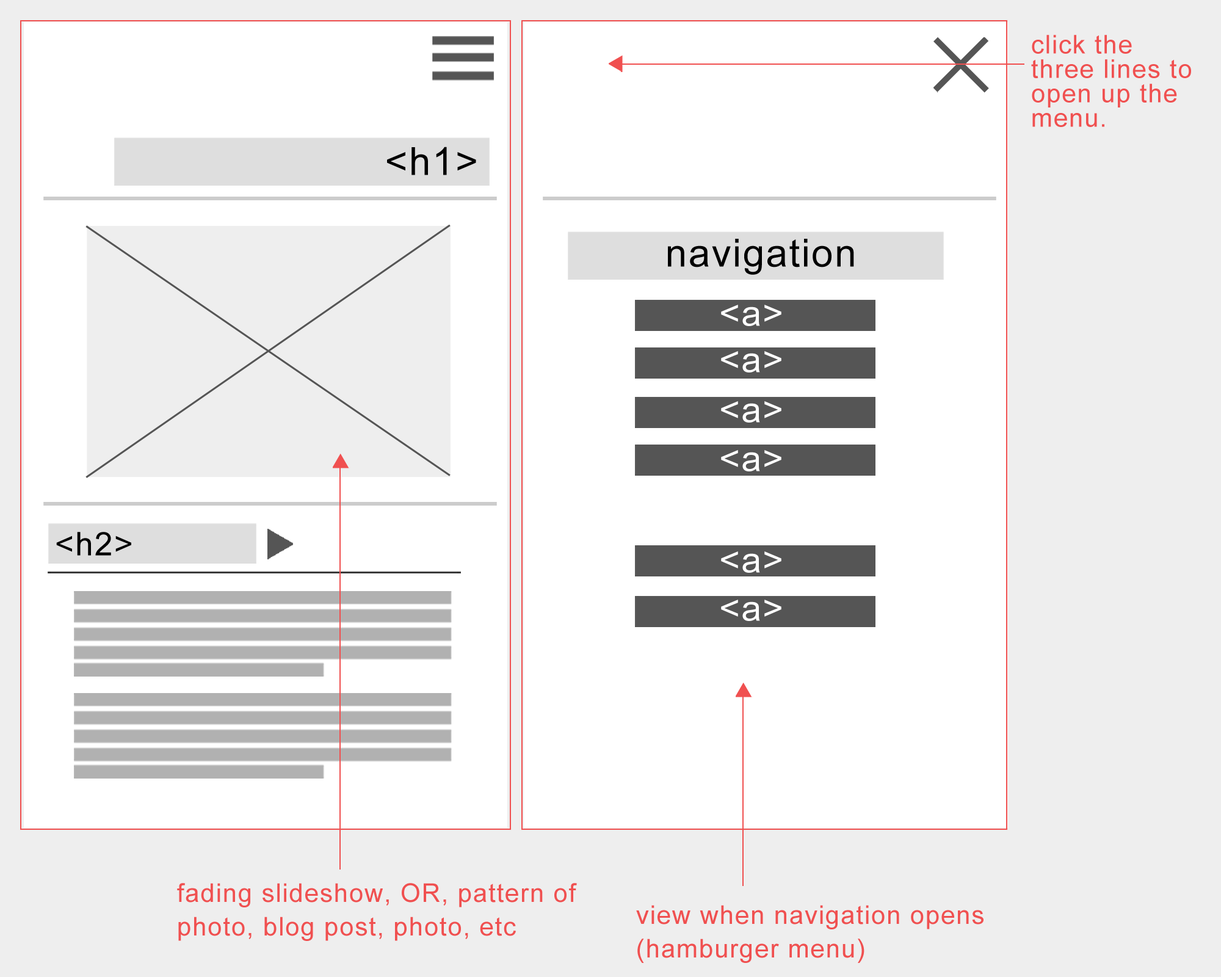
<style>
.page{position:relative;width:1221px;height:977px;background:#ffffff}
.page>*{position:absolute;margin:0}
.t1{font:25.8px/24.4px "ArialMT";letter-spacing:0.04em;color:#f05050}
.t2{font:38.8px "ArialMT";letter-spacing:0.04em;color:#000000}
.t3{font:35.6px "ArialMT";letter-spacing:0.04em;color:#ffffff}
.t4{font:32.6px "ArialMT";letter-spacing:0.04em;color:#000000}
.t5{font:25.8px/33.6px "ArialMT";letter-spacing:0.04em;color:#f05050}
</style>
<div class="page">
<p class="t1" style="left:1031px;top:35px;width:160px;height:92px">click the three lines to open up the menu.</p>
<p class="t2" style="left:387px;top:147px;width:89px;height:28px">&lt;h1&gt;</p>
<p class="t2" style="left:668px;top:239px;width:186px;height:36px">navigation</p>
<p class="t3" style="left:721px;top:305px;width:60px;height:21px">&lt;a&gt;</p>
<p class="t3" style="left:721px;top:351px;width:60px;height:21px">&lt;a&gt;</p>
<p class="t3" style="left:721px;top:401px;width:60px;height:21px">&lt;a&gt;</p>
<p class="t3" style="left:721px;top:450px;width:60px;height:21px">&lt;a&gt;</p>
<p class="t4" style="left:56px;top:532px;width:75px;height:23px">&lt;h2&gt;</p>
<p class="t3" style="left:721px;top:551px;width:60px;height:22px">&lt;a&gt;</p>
<p class="t3" style="left:721px;top:599px;width:60px;height:22px">&lt;a&gt;</p>
<p class="t5" style="left:177px;top:883px;width:400px;height:58px">fading slideshow, OR, pattern of photo, blog post, photo, etc</p>
<p class="t5" style="left:636px;top:905px;width:347px;height:58px">view when navigation opens (hamburger menu)</p>
</div>
